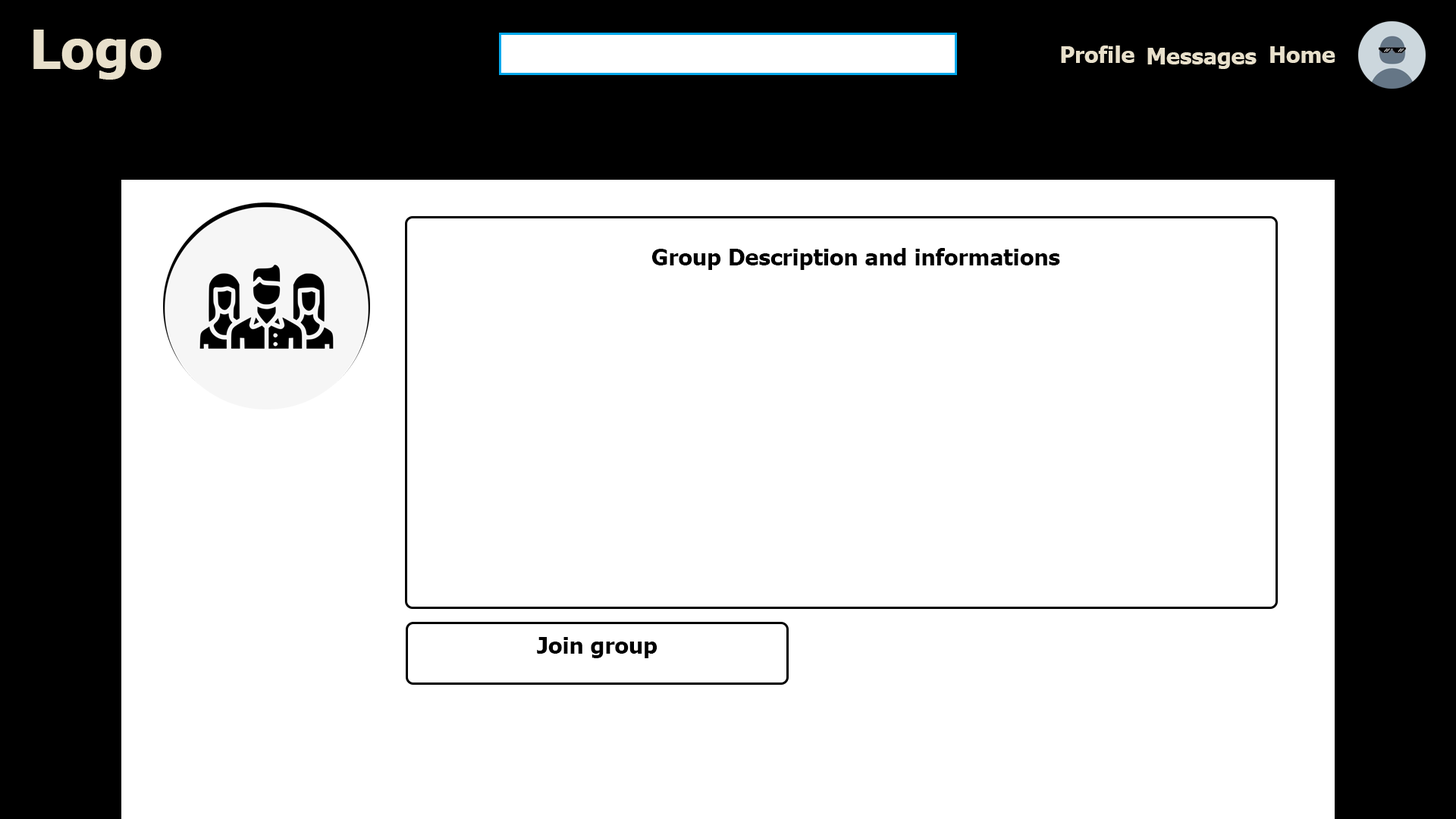
<style>
.page{position:relative;width:1456px;height:819px;background:#ffffff}
.page>*{position:absolute;margin:0}
.t1{font:54.6px "Tahoma-Bold";color:#e8e0cb}
.t2{font:22.7px "Tahoma-Bold";color:#e8e0cb}
.t3{font:22.7px "Tahoma-Bold";color:#000000}
</style>
<div class="page">
<p class="t1" style="left:33px;top:30px;width:129px;height:50px">Logo</p>
<p class="t2" style="left:1061px;top:45px;width:73px;height:18px">Profile</p>
<p class="t2" style="left:1147px;top:48px;width:110px;height:21px">Messages</p>
<p class="t2" style="left:1270px;top:46px;width:65px;height:17px">Home</p>
<p class="t3" style="left:652px;top:248px;width:408px;height:22px">Group Description and informations</p>
<p class="t3" style="left:537px;top:637px;width:120px;height:21px">Join group</p>
</div>
